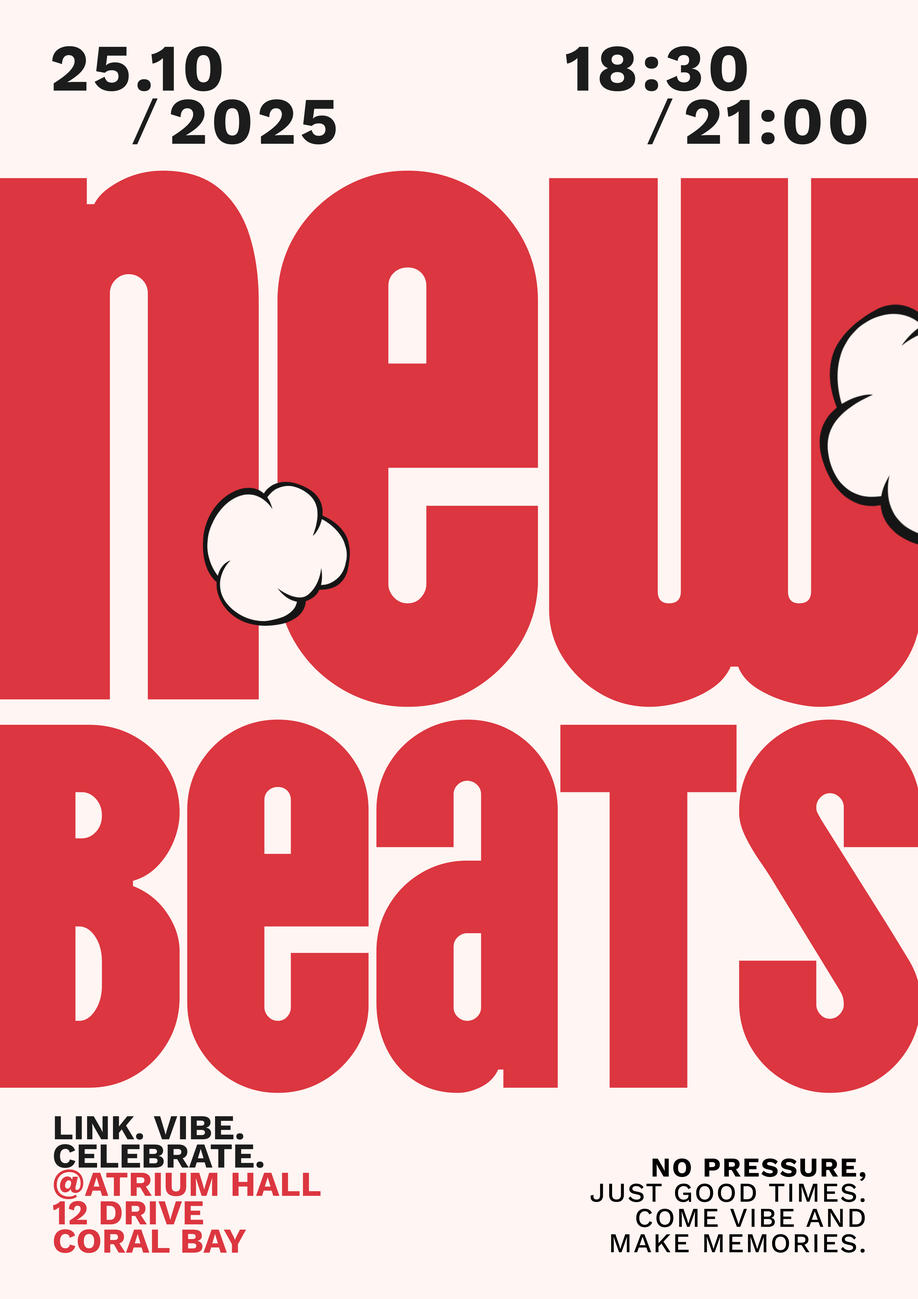
<style>
.page{position:relative;width:918px;height:1299px;background:#dc3640}
.page>*{position:absolute;margin:0}
.t1{font:66.3px "WorkSansRoman-Bold";letter-spacing:0.05em;color:#1c1c1c}
.t2{font:34.9px/28.4px "WorkSansRoman-Bold";color:#dc3640;text-transform:uppercase}
.t3{font:34.9px/28.4px "WorkSansRoman-Bold";color:#1c1c1c;text-transform:uppercase}
.t4{font:27.3px/25.2px "WorkSansRoman-Medium";letter-spacing:0.05em;color:#000000;text-transform:uppercase}
.t5{font:27.3px/25.2px "WorkSansRoman-Bold";letter-spacing:0.05em;color:#000000;text-transform:uppercase}
</style>
<div class="page">
<p class="t1" style="left:52px;top:46px;width:170px;height:45px">25.10</p>
<p class="t1" style="left:566px;top:46px;width:181px;height:45px">18:30</p>
<p class="t1" style="left:171px;top:99px;width:165px;height:45px">2025</p>
<p class="t1" style="left:686px;top:99px;width:181px;height:45px">21:00</p>
<p class="t2" style="left:53px;top:1116px;width:268px;height:137px"><span class="t3">Link. Vibe.<br>Celebrate.<br></span>@atrium hall<br>12 drive<br>coral bay</p>
<p class="t4" style="left:591px;top:1158px;width:275px;height:95px;text-align:right"><span class="t5">No pressure,<br></span>just good times.<br>Come vibe and<br>make memories.</p>
</div>
